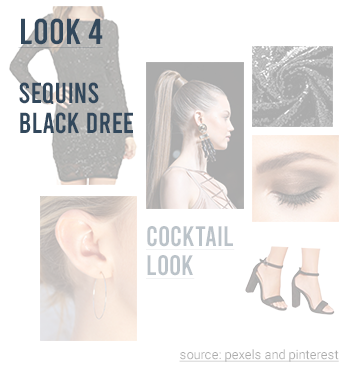
<style>
.page{position:relative;width:347px;height:370px;background:#ffffff}
.page>*{position:absolute;margin:0}
.t1{font:29px/30px "Bebas-Regular";color:#32485c}
.t2{font:36px/29px "Bebas-Regular";color:#32485c;text-decoration:underline}
.t3{font:28px/29px "Bebas-Regular";color:#bbc3c9;text-decoration:underline}
.t4{font:13px "Roboto-Regular";color:#ababab;text-decoration:underline}
</style>
<div class="page">
<p class="t1" style="left:18px;top:18px;width:115px;height:116px"><span class="t2">LOOK 4<br><br></span>sequins <br>black dree</p>
<p class="t3" style="left:146px;top:226px;width:89px;height:53px">COCKTAIL<br>LOOK</p>
<p class="t4" style="left:179px;top:349px;width:160px;height:13px">source: pexels and pinterest</p>
</div>
